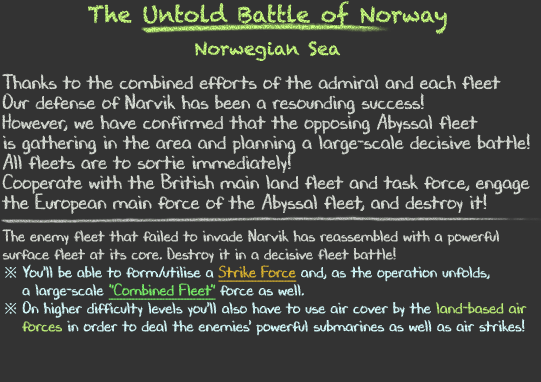
<style>
.page{position:relative;width:541px;height:382px;background:#333333}
.page>*{position:absolute;margin:0}
.t1{font:22px/36px "Chalkduster"}
.t2{font:18px/36px "Chalkduster"}
.t3{font:20px/20px "DJBChalkItUp";color:#d9ded6}
.t4{font:16px/18px "DJBChalkItUp";color:#d9ded6}
.t5{font:16px/18px "TimesNewRomanPSMT";color:#d7feff}
.t6{font:16px/18px "DJBChalkItUp";color:#d7feff}
.t7{font:16px/18px "DJBChalkItUp";color:#dfb731;text-decoration:underline}
.t8{font:16px/18px "DJBChalkItUp";color:#7bf26b;text-decoration:underline}
.t9{font:16px/18px "DJBChalkItUp";color:#bdef78}
</style>
<div class="page">
<p class="t1" style="left:88px;top:1px;width:359px;height:60px;text-align:center">The Untold Battle of Norway<br><span class="t2">Norwegian Sea</span></p>
<p class="t3" style="left:1px;top:73px;width:529px;height:263px">Thanks to the combined efforts of the admiral and each fleet<br>Our defense of Narvik has been a resounding success!<br>However, we have confirmed that the opposing Abyssal fleet<br>is gathering in the area and planning a large-scale decisive battle!<br>All fleets are to sortie immediately!<br>Cooperate with the British main land fleet and task force, engage<br>the European main force of the Abyssal fleet, and destroy it!<br><br><span class="t4">The enemy fleet that failed to invade Narvik has reassembled with a powerful<br>surface fleet at its core. Destroy it in a decisive fleet battle!<br></span><span class="t5">※ </span><span class="t6">You'll be able to form/utilise a </span><span class="t7">Strike Force</span><span class="t6"> and, as the operation unfolds,<br>　 a large-scale </span><span class="t8">"Combined Fleet"</span><span class="t6"> force as well.<br></span><span class="t5">※ </span><span class="t6">On higher difficulty levels you'll also have to use air cover by the </span><span class="t9">land-based air<br>　 forces</span><span class="t6"> in order to deal the enemies' powerful submarines as well as air strikes!</span></p>
</div>
